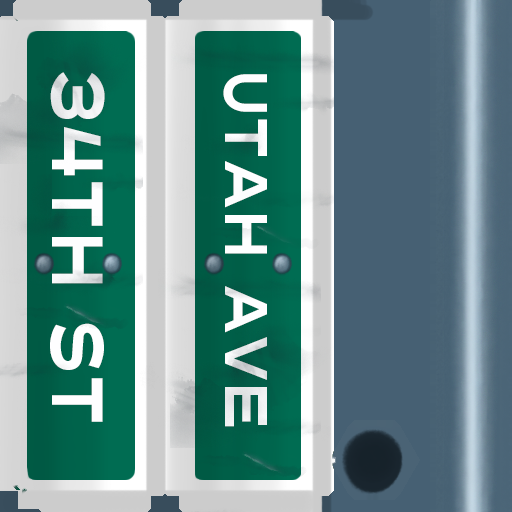
<style>
.page{position:relative;width:512px;height:512px}
.page>*{position:absolute;margin:0}
.t1{font:72px "Turnpike";color:#fefeff;scale:0.75 1}
.t2{font:60px "Turnpike";color:#fefeff;scale:0.75 1}
</style>
<div class="page">
<p class="t1" style="left:50px;top:72px;width:55px;height:350px;rotate:90deg">34th st</p>
<p class="t2" style="left:223px;top:74px;width:44px;height:353px;rotate:90deg">Utah Ave</p>
</div>
